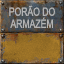
<style>
.page{position:relative;width:64px;height:64px}
.page>*{position:absolute;margin:0}
.t1{font:11.3px/12px "ArialMT";color:#c7c7c7;text-transform:uppercase;scale:0.76 1}
</style>
<div class="page">
<p class="t1" style="left:9px;top:5px;width:46px;height:23px;text-align:center;opacity:0.8">Porão do<br>armazém</p>
</div>
